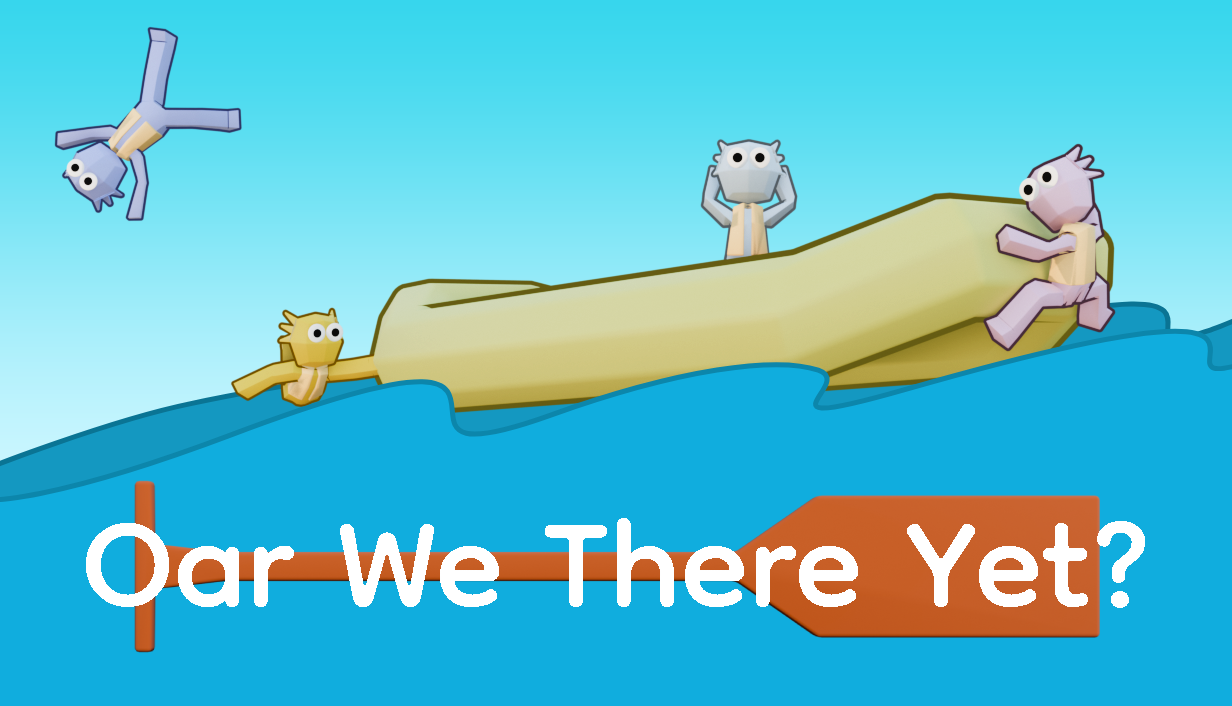
<style>
.page{position:relative;width:1232px;height:706px;background:#10adde}
.page>*{position:absolute;margin:0}
.t1{font:200px "Dongle-Regular";color:#ffffff}
</style>
<div class="page">
<p class="t1" style="left:86px;top:518px;width:1059px;height:90px">Oar We There Yet?</p>
</div>
